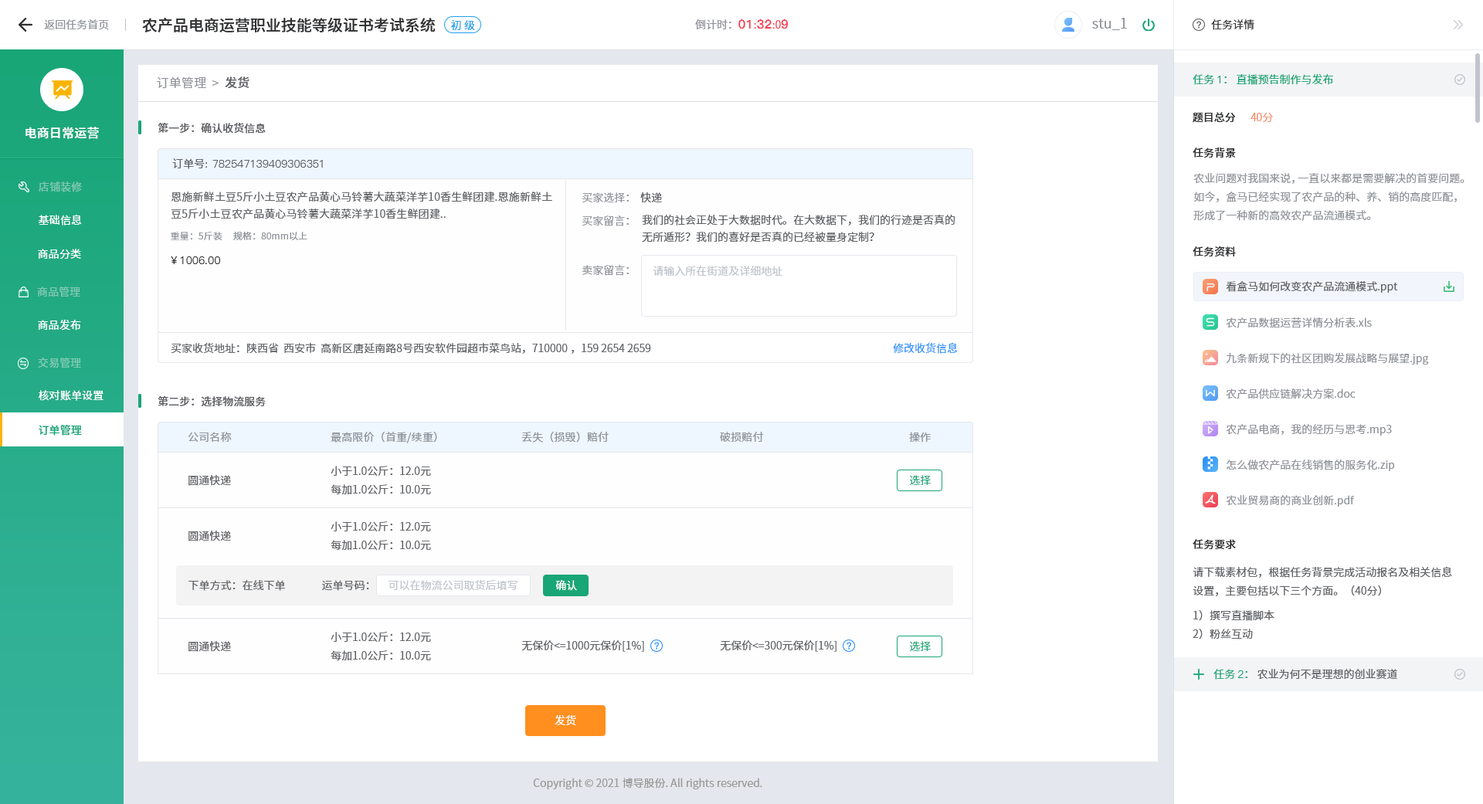
<style>
.page{position:relative;width:1483px;height:804px;background:#ffffff}
.page>*{position:absolute;margin:0}
.t1{font:15.4px "SourceHanSansCN-Medium";color:#303133}
.t2{font:13.9px "SourceHanSansCN-Normal";color:#909399}
.t3{font:10.8px "SourceHanSansCN-Normal";color:#909399}
.t4{font:10.8px "SourceHanSansCN-Normal";color:#1da0ea}
.t5{font:12.4px "PingFang-SC-Heavy";color:#f63f52}
.t6{font:10.8px "SourceHanSansCN-Normal";color:#f63f52}
.t7{font:10.8px "SourceHanSansCN-Normal";color:#303133}
.t8{font:12.4px "SourceHanSansCN-Normal";letter-spacing:0.01em;color:#909399}
.t9{font:12.4px "SourceHanSansCN-Medium";letter-spacing:0.01em;color:#606266}
.t10{font:10.8px "SourceHanSansCN-Normal";color:#19a677}
.t11{font:10.8px "PingFang-SC-Medium";color:#19a677}
.t12{font:10.8px "SourceHanSansCN-Medium";color:#303133}
.t13{font:10.8px "SourceHanSansCN-Light";color:#f67d53}
.t14{font:10.8px "SourceHanSansCN-Medium";color:#606266}
.t15{font:12.4px "SourceHanSansCN-Medium";letter-spacing:0.01em;color:#ffffff}
.t16{font:10.8px "PingFang-SC-Medium";letter-spacing:0.01em;color:#606266}
.t17{font:10.8px "SourceHanSansCN-Normal";letter-spacing:0.01em;color:#606266}
.t18{font:10.8px/18.5px "SourceHanSansCN-Normal";color:#909399}
.t19{font:10.8px "SourceHanSansCN-Regular";letter-spacing:0.01em;color:#81c8b0}
.t20{font:10.8px/17px "SourceHanSansCN-Normal";letter-spacing:0.01em;color:#606266}
.t21{font:10.8px "SourceHanSansCN-Normal";color:#606266}
.t22{font:10.8px "SourceHanSansCN-Normal";letter-spacing:0.01em;color:#ffffff}
.t23{font:10.8px/17px "SourceHanSansCN-Normal";color:#606266}
.t24{font:9.3px "SourceHanSansCN-Normal";letter-spacing:0.01em;color:#909399}
.t25{font:10.8px "PingFang-SC-Medium";letter-spacing:0.01em;color:#333333}
.t26{font:10.8px "SourceHanSansCN-Normal";color:#c0c4cc}
.t27{font:10.8px "SourceHanSansCN-Regular";letter-spacing:0.01em;color:#82cab3}
.t28{font:10.8px "SourceHanSansCN-Regular";letter-spacing:0.01em;color:#ffffff}
.t29{font:10.8px "SourceHanSansCN-Normal";color:#3395fa}
.t30{font:10.8px "SourceHanSansCN-Regular";letter-spacing:0.01em;color:#83cbb5}
.t31{font:10.8px "SourceHanSansCN-Medium";letter-spacing:0.01em;color:#19a677}
.t32{font:10.8px "SourceHanSansCN-Normal";letter-spacing:0.01em;color:#909399}
.t33{font:10.8px/18.5px "SourceHanSansCN-Normal";color:#606266}
.t34{font:10.8px "SourceHanSansCN-Normal";color:#ffffff}
.t35{font:10.8px "PingFang-SC-Medium";color:#1aa678}
.t36{font:10.8px "SourceHanSansCN-Normal";color:#1aa678}
.t37{font:10.8px "SourceHanSansCN-Normal";color:#999999}
</style>
<div class="page">
<p class="t1" style="left:142px;top:17px;width:294px;height:15px">农产品电商运营职业技能等级证书考试系统</p>
<p class="t2" style="left:1092px;top:18px;width:35px;height:12px">stu_1</p>
<p class="t3" style="left:44px;top:19px;width:65px;height:11px">返回任务首页</p>
<p class="t4" style="left:450px;top:20px;width:25px;height:11px">初 级</p>
<p class="t3" style="left:695px;top:19px;width:93px;height:11px">倒计时：<span class="t5">01</span><span class="t6">:</span><span class="t5">32</span><span class="t6">:0</span><span class="t5">9</span></p>
<p class="t7" style="left:1211px;top:19px;width:43px;height:11px">任务详情</p>
<p class="t8" style="left:157px;top:76px;width:92px;height:13px">订单管理  &gt;<span class="t9">  发货</span></p>
<p class="t10" style="left:1193px;top:73px;width:140px;height:12px">任务 <span class="t11">1</span>： 直播预告制作与发布</p>
<p class="t12" style="left:1193px;top:112px;width:43px;height:11px">题目总分</p>
<p class="t13" style="left:1251px;top:113px;width:22px;height:9px">40分</p>
<p class="t14" style="left:158px;top:122px;width:108px;height:12px">第一步：确认收货信息</p>
<p class="t15" style="left:25px;top:127px;width:74px;height:12px">电商日常运营</p>
<p class="t12" style="left:1193px;top:147px;width:43px;height:11px">任务背景</p>
<p class="t16" style="left:172px;top:158px;width:151px;height:11px"><span class="t17">订单号</span>: 782547139409306351</p>
<p class="t18" style="left:1193px;top:173px;width:271px;height:48px">农业问题对我国来说，一直以来都是需要解决的首要问题。如今，盒马已经实现了农产品的种、养、销的高度匹配，形成了一种新的高效农产品流通模式。</p>
<p class="t19" style="left:39px;top:182px;width:43px;height:10px">店铺装修</p>
<p class="t20" style="left:171px;top:192px;width:381px;height:27px">恩施新鲜土豆5斤小土豆农产品黄心马铃薯大蔬菜洋芋10香生鲜团建.恩施新鲜土豆5斤小土豆农产品黄心马铃薯大蔬菜洋芋10香生鲜团建..</p>
<p class="t3" style="left:582px;top:192px;width:80px;height:11px">买家选择：<span class="t21">  快递</span></p>
<p class="t22" style="left:39px;top:214px;width:43px;height:12px">基础信息</p>
<p class="t3" style="left:582px;top:215px;width:47px;height:11px">买家留言：</p>
<p class="t23" style="left:642px;top:215px;width:313px;height:28px">我们的社会正处于大数据时代。在大数据下，我们的行迹是否真的无所遁形？我们的喜好是否真的已经被量身定制？</p>
<p class="t24" style="left:171px;top:232px;width:136px;height:8px">重量：5斤装     规格：80mm以上</p>
<p class="t12" style="left:1193px;top:246px;width:43px;height:11px">任务资料</p>
<p class="t22" style="left:38px;top:249px;width:43px;height:10px">商品分类</p>
<p class="t25" style="left:171px;top:256px;width:49px;height:8px">￥1006.00</p>
<p class="t3" style="left:582px;top:265px;width:47px;height:11px">卖家留言：</p>
<p class="t26" style="left:653px;top:266px;width:129px;height:11px">请输入所在街道及详细地址</p>
<p class="t21" style="left:1226px;top:281px;width:172px;height:12px">看盒马如何改变农产品流通模式.ppt</p>
<p class="t27" style="left:37px;top:287px;width:43px;height:10px">商品管理</p>
<p class="t3" style="left:1226px;top:317px;width:146px;height:11px">农产品数据运营详情分析表.xls</p>
<p class="t28" style="left:38px;top:319px;width:43px;height:12px">商品发布</p>
<p class="t21" style="left:171px;top:342px;width:480px;height:12px">买家收货地址：陕西省  西安市  高新区唐延南路8号西安软件园超市菜鸟站，710000 ，159 2654 2659</p>
<p class="t29" style="left:893px;top:342px;width:65px;height:12px">修改收货信息</p>
<p class="t3" style="left:1226px;top:352px;width:203px;height:13px">九条新规下的社区团购发展战略与展望.jpg</p>
<p class="t30" style="left:38px;top:358px;width:43px;height:10px">交易管理</p>
<p class="t3" style="left:1226px;top:389px;width:130px;height:10px">农产品供应链解决方案.doc</p>
<p class="t22" style="left:39px;top:390px;width:65px;height:11px">核对账单设置</p>
<p class="t14" style="left:158px;top:395px;width:108px;height:12px">第二步：选择物流服务</p>
<p class="t31" style="left:39px;top:424px;width:43px;height:12px">订单管理</p>
<p class="t3" style="left:1226px;top:424px;width:166px;height:12px">农产品电商，我的经历与思考.mp3</p>
<p class="t32" style="left:188px;top:432px;width:44px;height:10px">公司名称</p>
<p class="t32" style="left:331px;top:432px;width:106px;height:11px">最高限价（首重/续重）</p>
<p class="t32" style="left:521px;top:432px;width:88px;height:11px">丢失（损毁）赔付</p>
<p class="t32" style="left:720px;top:432px;width:44px;height:10px">破损赔付</p>
<p class="t32" style="left:909px;top:432px;width:22px;height:11px">操作</p>
<p class="t3" style="left:1227px;top:460px;width:168px;height:11px">怎么做农产品在线销售的服务化.zip</p>
<p class="t33" style="left:331px;top:466px;width:100px;height:28px">小于1.0公斤：12.0元<br>每加1.0公斤：10.0元</p>
<p class="t21" style="left:188px;top:475px;width:43px;height:11px">圆通快递</p>
<p class="t10" style="left:909px;top:475px;width:22px;height:10px">选择</p>
<p class="t3" style="left:1226px;top:495px;width:129px;height:12px">农业贸易商的商业创新.pdf</p>
<p class="t33" style="left:331px;top:521px;width:100px;height:29px">小于1.0公斤：12.0元<br>每加1.0公斤：10.0元</p>
<p class="t21" style="left:188px;top:531px;width:43px;height:10px">圆通快递</p>
<p class="t12" style="left:1193px;top:539px;width:43px;height:11px">任务要求</p>
<p class="t33" style="left:1193px;top:566px;width:259px;height:74px">请下载素材包，根据任务背景完成活动报名及相关信息设置，主要包括以下三个方面。（40分）<br>1）撰写直播脚本<br>2）粉丝互动</p>
<p class="t21" style="left:188px;top:580px;width:97px;height:11px">下单方式：在线下单</p>
<p class="t21" style="left:322px;top:580px;width:47px;height:11px">运单号码：</p>
<p class="t26" style="left:389px;top:580px;width:129px;height:11px">可以在物流公司取货后填写</p>
<p class="t34" style="left:555px;top:580px;width:22px;height:11px">确认</p>
<p class="t21" style="left:188px;top:641px;width:43px;height:11px">圆通快递</p>
<p class="t33" style="left:331px;top:632px;width:100px;height:28px">小于1.0公斤：12.0元<br>每加1.0公斤：10.0元</p>
<p class="t21" style="left:521px;top:640px;width:123px;height:12px">无保价&lt;=1000元保价[1%]</p>
<p class="t21" style="left:720px;top:640px;width:117px;height:12px">无保价&lt;=300元保价[1%]</p>
<p class="t10" style="left:909px;top:641px;width:22px;height:10px">选择</p>
<p class="t21" style="left:1213px;top:669px;width:184px;height:11px"><span class="t10">任务 </span><span class="t35">2</span><span class="t36">：</span> 农业为何不是理想的创业赛道</p>
<p class="t34" style="left:555px;top:714px;width:21px;height:11px">发货</p>
<p class="t37" style="left:533px;top:778px;width:229px;height:11px">Copyright © 2021 博导股份. All rights reserved.</p>
</div>
